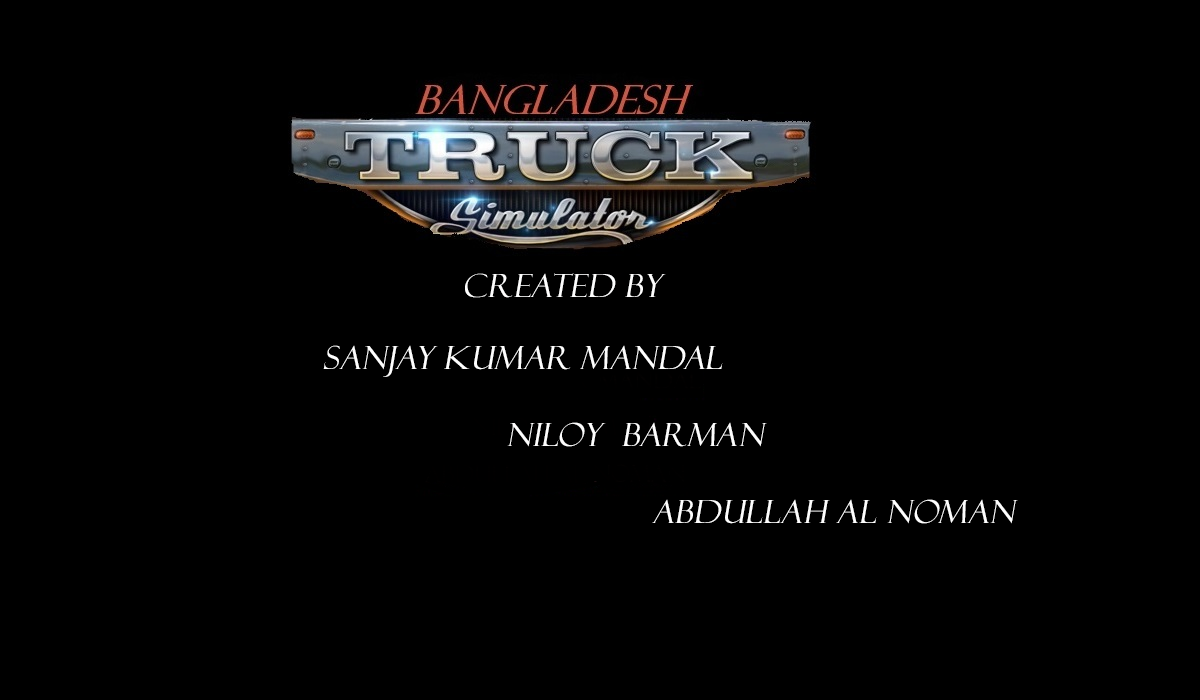
<style>
.page{position:relative;width:1200px;height:700px;background:#000000}
.page>*{position:absolute;margin:0}
.t1{font:32px "FelixTitlingMT";letter-spacing:0.01em;color:#fefefe;font-style:italic}
</style>
<div class="page">
<p class="t1" style="left:465px;top:273px;width:201px;height:25px">Created by</p>
<p class="t1" style="left:323px;top:345px;width:444px;height:102px">Sanjay Kumar Mandal<br><br>                   niloy  Barman</p>
<p class="t1" style="left:652px;top:499px;width:366px;height:25px">Abdullah al noman</p>
</div>
